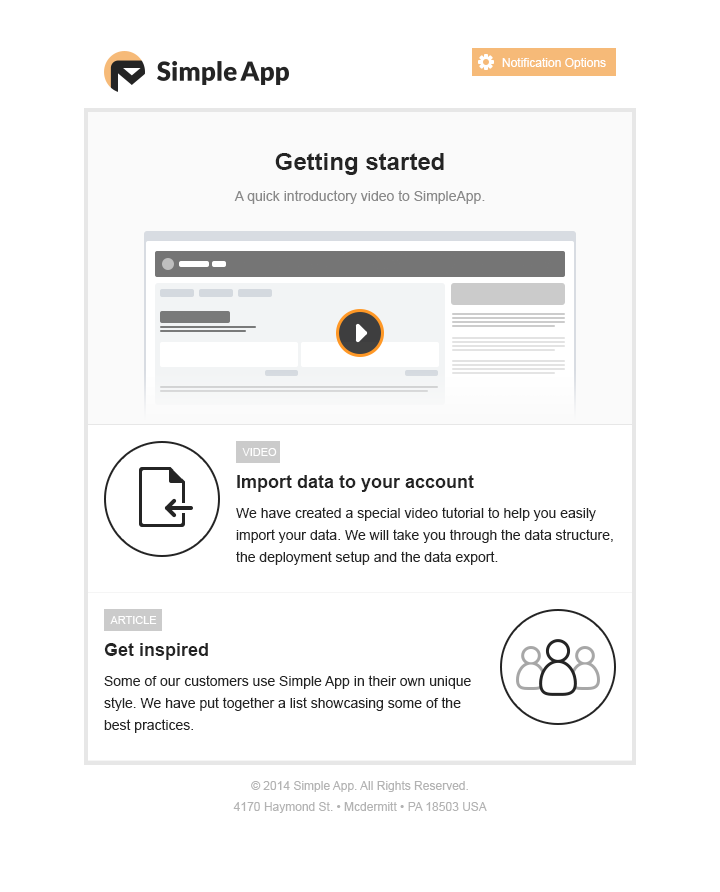
<style>
.page{position:relative;width:720px;height:892px;background:#ffffff}
.page>*{position:absolute;margin:0}
.t1{font:12px "ArialMT";color:#ffffff}
.t2{font:24px "Arial-BoldMT";color:#242424}
.t3{font:14px "ArialMT";color:#898989}
.t4{font:11px "ArialMT";color:#ffffff;text-transform:uppercase}
.t5{font:18px "Arial-BoldMT";color:#242424}
.t6{font:14px/22px "ArialMT";color:#242424}
.t7{font:12px/21px "ArialMT";color:#b3b3b3}
</style>
<div class="page">
<p class="t1" style="left:502px;top:58px;width:104px;height:11px">Notification Options</p>
<p class="t2" style="left:275px;top:153px;width:169px;height:22px">Getting started</p>
<p class="t3" style="left:234px;top:190px;width:251px;height:14px">A quick introductory video to SimpleApp.</p>
<p class="t4" style="left:242px;top:448px;width:35px;height:8px">Video</p>
<p class="t5" style="left:237px;top:475px;width:237px;height:17px">Import data to your account</p>
<p class="t6" style="left:236px;top:507px;width:377px;height:58px">We have created a special video tutorial to help you easily import your data. We will take you through the data structure, the deployment setup and the data export.</p>
<p class="t4" style="left:110px;top:616px;width:47px;height:8px">Article</p>
<p class="t5" style="left:104px;top:643px;width:104px;height:17px">Get inspired</p>
<p class="t6" style="left:104px;top:675px;width:367px;height:58px">Some of our customers use Simple App in their own unique style. We have put together a list showcasing some of the best practices.</p>
<p class="t7" style="left:233px;top:781px;width:254px;height:32px;text-align:center">© 2014 Simple App. All Rights Reserved.<br>4170 Haymond St. • Mcdermitt • PA 18503 USA</p>
</div>
